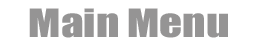
<style>
.page{position:relative;width:256px;height:48px;background:#ffffff}
.page>*{position:absolute;margin:0}
.t1{font:36px "Impact";color:#959494;scale:1.25 1}
</style>
<div class="page">
<p class="t1" style="left:29px;top:8px;width:199px;height:30px">Main Menu</p>
</div>
